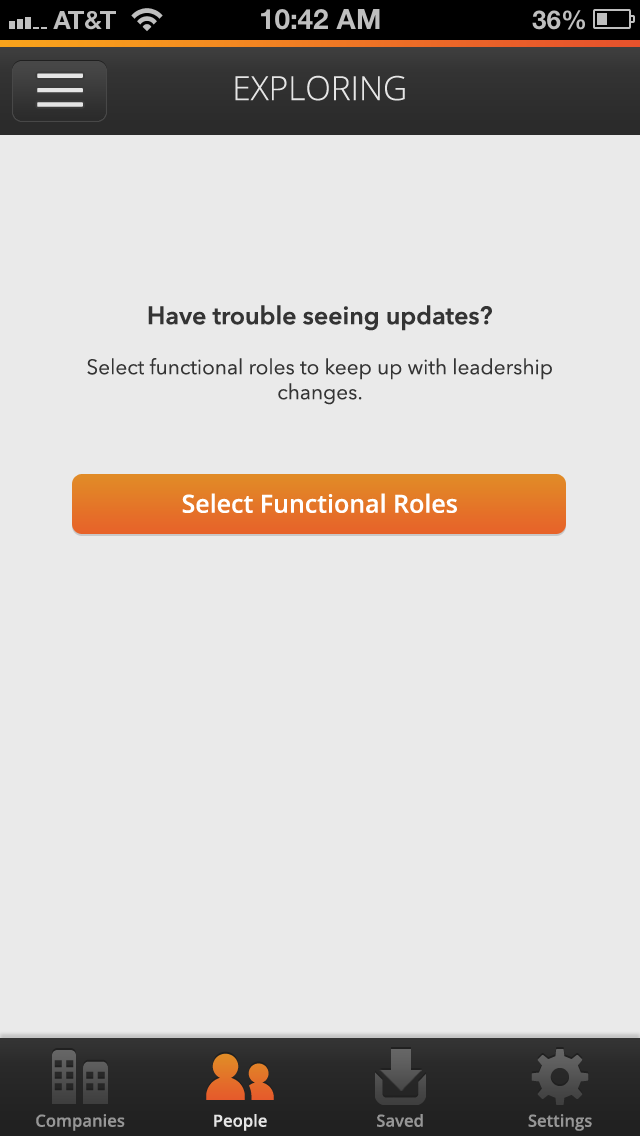
<style>
.page{position:relative;width:640px;height:1136px;background:#eaeaea}
.page>*{position:absolute;margin:0}
.t1{font:33.3px "OpenSans-Light";color:#e5e5e5}
.t2{font:20.8px "AvenirNext-Regular";color:#343434}
.t3{font:25px "AvenirNext-DemiBold";color:#343434}
.t4{font:25px "OpenSans-Semibold";color:#ffffff}
.t5{font:16.7px "OpenSans-Semibold";color:#969696}
.t6{font:16.7px "OpenSans-Semibold";color:#e5e5e5}
</style>
<div class="page">
<p class="t1" style="left:235px;top:75px;width:170px;height:26px">EXPLORING</p>
<p class="t2" style="left:87px;top:305px;width:465px;height:100px;text-align:center"><span class="t3">Have trouble seeing updates?<br><br></span>Select functional roles to keep up with leadership changes.</p>
<p class="t4" style="left:182px;top:493px;width:275px;height:20px">Select Functional Roles</p>
<p class="t5" style="left:36px;top:1114px;width:89px;height:17px">Companies</p>
<p class="t6" style="left:214px;top:1114px;width:53px;height:17px">People</p>
<p class="t5" style="left:377px;top:1114px;width:46px;height:13px">Saved</p>
<p class="t5" style="left:528px;top:1114px;width:64px;height:17px">Settings</p>
</div>
